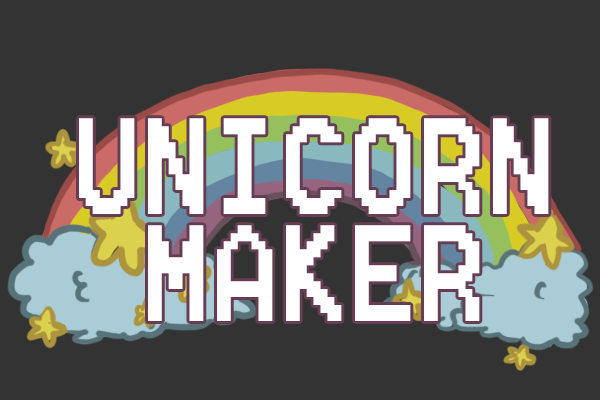
<style>
.page{position:relative;width:600px;height:400px;background:#333333}
.page>*{position:absolute;margin:0}
.t1{font:122.5px/106.5px "8514oem";color:#ffffff;scale:0.87 1}
</style>
<div class="page">
<p class="t1" style="left:79px;top:118px;width:470px;height:203px;text-align:center">UNICORN<br>MAKER</p>
</div>
